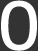
<style>
.page{position:relative;width:38px;height:51px;background:#333333}
.page>*{position:absolute;margin:0}
.t1{font:66.7px "RoundedMplus1c-Medium";color:#ffffff}
</style>
<div class="page">
<p class="t1" style="left:1px;top:0px;width:36px;height:51px">0</p>
</div>
